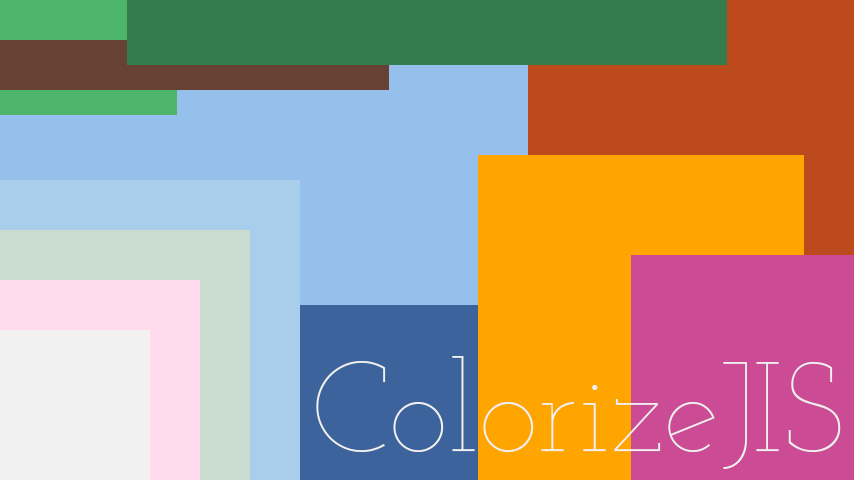
<style>
.page{position:relative;width:854px;height:480px}
.page>*{position:absolute;margin:0}
.t1{font:127px "JosefinSlab-Thin";color:#f1f1f1}
</style>
<div class="page">
<p class="t1" style="left:316px;top:356px;width:525px;height:113px">ColorizeJIS</p>
</div>
